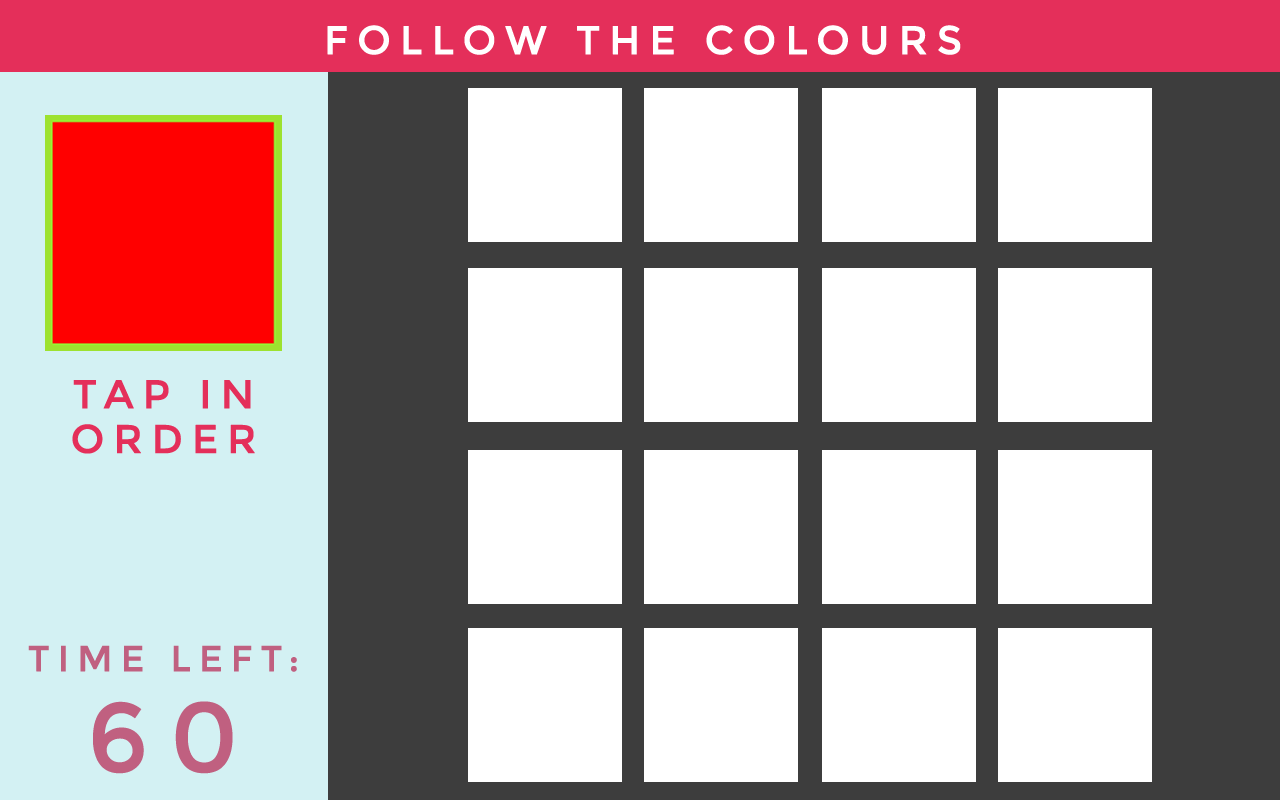
<style>
.page{position:relative;width:1280px;height:800px;background:#ffffff}
.page>*{position:absolute;margin:0}
.t1{font:40px "Montserrat-Regular";letter-spacing:0.2em;color:#ffffff;text-transform:uppercase;font-weight:bold}
.t2{font:40px/44.9px "Montserrat-Regular";letter-spacing:0.2em;color:#e42f5a;text-transform:uppercase;font-weight:bold}
.t3{font:36px/44.9px "Montserrat-Regular";letter-spacing:0.2em;color:#c06080;text-transform:uppercase;font-weight:bold}
.t4{font:98px/100.9px "Montserrat-Regular";letter-spacing:0.2em;color:#c06080;text-transform:uppercase;font-weight:bold}
</style>
<div class="page">
<p class="t1" style="left:327px;top:25px;width:634px;height:30px">Follow The Colours</p>
<p class="t2" style="left:72px;top:380px;width:183px;height:74px;text-align:center">Tap in <br>order</p>
<p class="t3" style="left:28px;top:645px;width:269px;height:129px;text-align:center">Time Left:<br><span class="t4">60</span></p>
</div>
